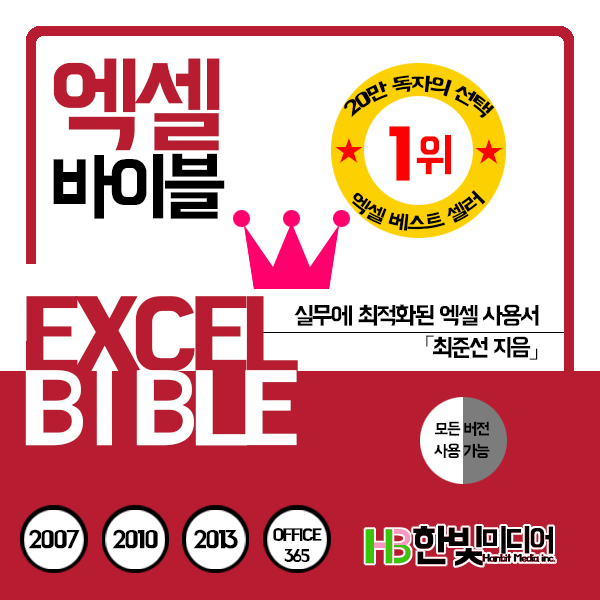
<style>
.page{position:relative;width:600px;height:600px;background:#ffffff}
.page>*{position:absolute;margin:0}
.t1{font:76.7px/72px "BMHANNAPro";letter-spacing:-0.09em;color:#000000}
.t2{font:108.7px/48px "BMHANNAPro";letter-spacing:-0.09em;color:#b81c31}
.t3{font:19.5px/25.6px "BMHANNAPro";letter-spacing:-0.09em;color:#000000}
.t4{font:74.8px "BMHANNAPro";letter-spacing:-0.09em;color:#fd0101}
.t5{font:46.8px "BMHANNAPro";letter-spacing:-0.05em;color:#fd0101}
.t6{font:30px "NanumBarunGothic";letter-spacing:-0.05em;color:#fd0101}
.t7{font:24.7px/48px "BMHANNAPro";letter-spacing:-0.09em;color:#010000}
.t8{font:24.7px/32px "NanumBarunGothic";letter-spacing:-0.09em;color:#010000}
.t9{font:24.7px/32px "BMHANNAPro";letter-spacing:-0.09em;color:#010000}
.t10{font:16.7px/44px "BMHANNAPro";letter-spacing:-0.09em;color:#000000}
.t11{font:16.7px/22px "BMHANNAPro";letter-spacing:-0.09em;color:#000000}
.t12{font:24.9px "BMHANNAPro";letter-spacing:-0.09em;color:#000000}
.t13{font:17.5px/20.3px "BMHANNAPro";letter-spacing:-0.09em;color:#000000}
.t14{font:32.7px "BMHANNAPro";letter-spacing:-0.09em;color:#000000}
.t15{font:46.7px "BMHANNAPro";letter-spacing:-0.09em;color:#000000}
.t16{font:10.3px "BMHANNAPro";letter-spacing:-0.09em;color:#000000;scale:1.18 1}
</style>
<div class="page">
<p class="t1" style="left:53px;top:58px;width:172px;height:161px;text-align:center"><span class="t2">엑셀<br></span>바이블</p>
<p class="t3" style="left:344px;top:75px;width:151px;height:43px;text-align:center">20만 독자의 선택</p>
<p class="t4" style="left:389px;top:126px;width:62px;height:55px">1<span class="t5">위</span></p>
<p class="t6" style="left:335px;top:137px;width:28px;height:26px">★</p>
<p class="t6" style="left:475px;top:138px;width:28px;height:26px">★</p>
<p class="t3" style="left:351px;top:190px;width:135px;height:41px;text-align:center">엑셀 베스트 셀러</p>
<p class="t7" style="left:294px;top:304px;width:245px;height:56px;text-align:right">실무에 최적화된 엑셀 사용서<br><span class="t8">「</span><span class="t9">최준선 지음</span><span class="t8">」</span></p>
<p class="t10" style="left:434px;top:421px;width:56px;height:37px;text-align:center">모든 버전<br><span class="t11">사용 가능</span></p>
<p class="t12" style="left:28px;top:529px;width:52px;height:20px">2007</p>
<p class="t12" style="left:112px;top:529px;width:46px;height:20px">2010</p>
<p class="t12" style="left:193px;top:529px;width:45px;height:20px">2013</p>
<p class="t13" style="left:273px;top:528px;width:49px;height:34px;text-align:center">OFFICE<br>365</p>
<p class="t14" style="left:413px;top:525px;width:140px;height:41px"><span class="t15">한빛</span>미디어</p>
<p class="t16" style="left:482px;top:553px;width:73px;height:9px">Hanbit Media inc.</p>
</div>
